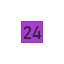
<style>
.page{position:relative;width:64px;height:64px;background:#ffffff}
.page>*{position:absolute;margin:0}
.t1{font:18px "Bahnschrift";color:#2b2b2b}
</style>
<div class="page">
<p class="t1" style="left:23px;top:25px;width:18px;height:15px">24</p>
</div>
